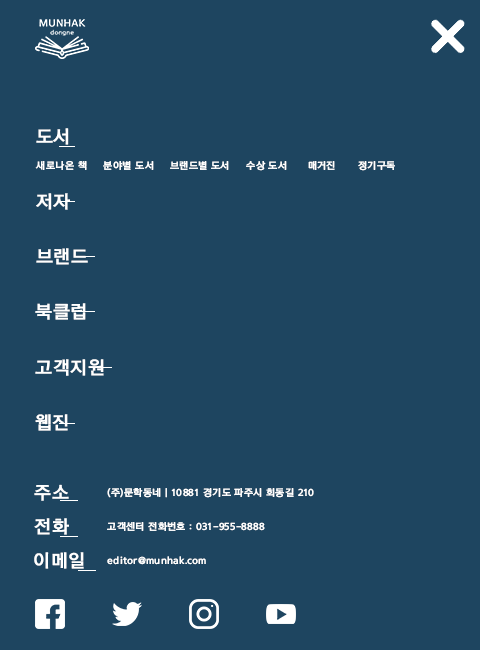
<style>
.page{position:relative;width:480px;height:650px;background:#1e4560}
.page>*{position:absolute;margin:0}
.t1{font:18.1px "THELuxGoM";letter-spacing:0.02em;color:#ffffff;font-weight:bold}
.t2{font:9.7px "THELuxGoM";letter-spacing:0.02em;color:#ffffff;font-weight:bold}
</style>
<div class="page">
<p class="t1" style="left:36px;top:128px;width:33px;height:17px">도서</p>
<p class="t2" style="left:35px;top:161px;width:52px;height:9px">새로나온 책</p>
<p class="t2" style="left:103px;top:161px;width:51px;height:9px">분야별 도서</p>
<p class="t2" style="left:170px;top:161px;width:59px;height:9px">브랜드별 도서</p>
<p class="t2" style="left:246px;top:161px;width:41px;height:10px">수상 도서</p>
<p class="t2" style="left:308px;top:161px;width:27px;height:9px">매거진</p>
<p class="t2" style="left:358px;top:161px;width:37px;height:10px">정기구독</p>
<p class="t1" style="left:36px;top:193px;width:34px;height:17px">저자</p>
<p class="t1" style="left:36px;top:248px;width:52px;height:17px">브랜드</p>
<p class="t1" style="left:35px;top:303px;width:51px;height:17px">북클럽</p>
<p class="t1" style="left:35px;top:359px;width:69px;height:17px">고객지원</p>
<p class="t1" style="left:35px;top:414px;width:33px;height:17px">웹진</p>
<p class="t1" style="left:34px;top:484px;width:35px;height:17px">주소</p>
<p class="t2" style="left:107px;top:488px;width:207px;height:10px">(주)문학동네 | 10881 경기도 파주시 회동길 210</p>
<p class="t1" style="left:34px;top:518px;width:35px;height:17px">전화</p>
<p class="t2" style="left:107px;top:522px;width:158px;height:9px">고객센터 전화번호 : 031-955-8888</p>
<p class="t1" style="left:34px;top:552px;width:50px;height:17px">이메일</p>
<p class="t2" style="left:107px;top:556px;width:99px;height:9px">editor@munhak.com</p>
</div>
